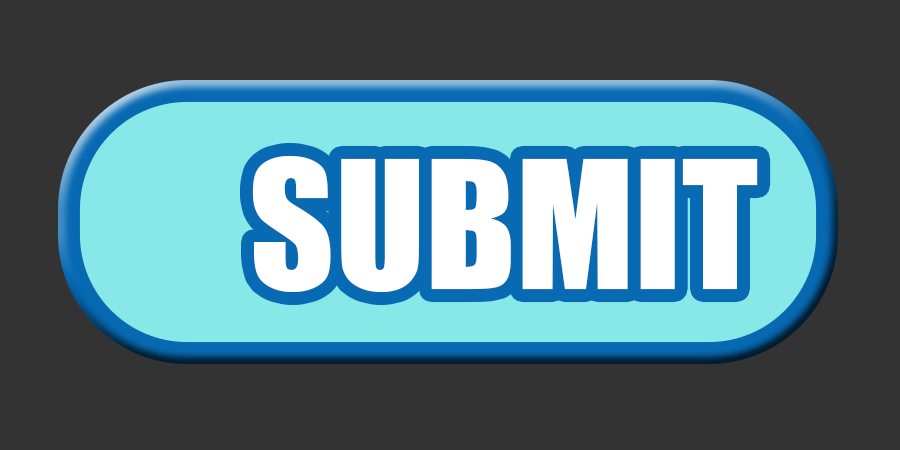
<style>
.page{position:relative;width:900px;height:450px;background:#333333}
.page>*{position:absolute;margin:0}
.t1{font:165px "Impact";color:#ffffff;text-transform:uppercase}
</style>
<div class="page">
<p class="t1" style="left:252px;top:155px;width:506px;height:137px">Submit</p>
</div>
